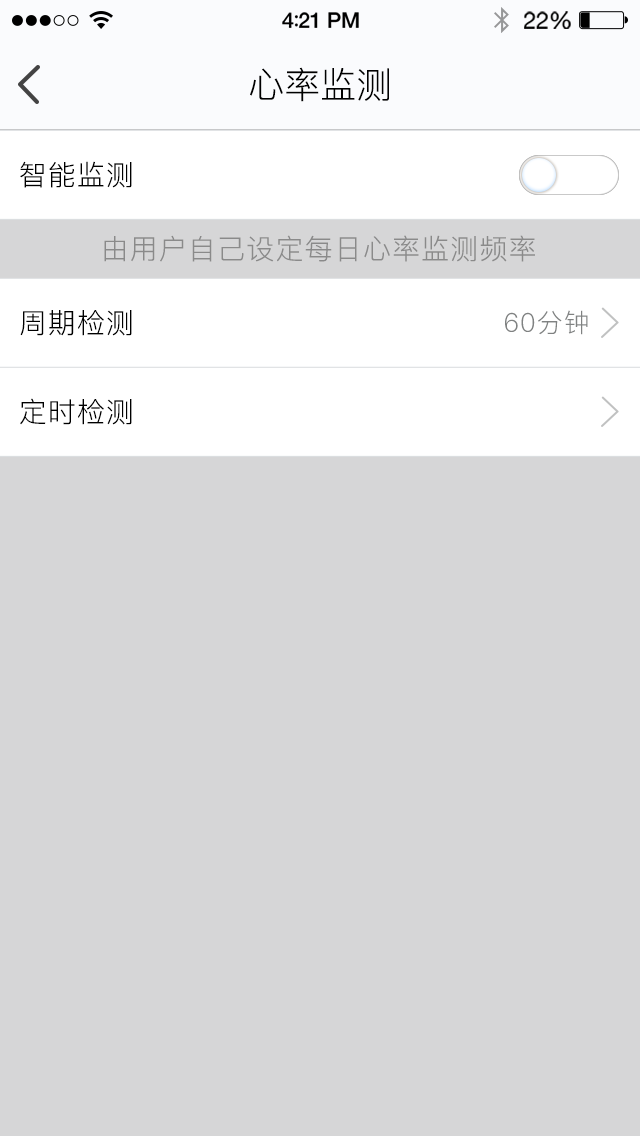
<style>
.page{position:relative;width:640px;height:1136px;background:#d6d6d7}
.page>*{position:absolute;margin:0}
.t1{font:36px "PingFang-SC-Regular";color:#000000}
.t2{font:28px "PingFang-SC-Regular";letter-spacing:0.04em;color:#000000}
.t3{font:28px "PingFang-SC-Regular";letter-spacing:0.04em;color:#8a8a8a}
.t4{font:26px "PingFang-SC-Regular";letter-spacing:0.04em;color:#808282}
</style>
<div class="page">
<p class="t1" style="left:250px;top:67px;width:139px;height:35px">心率监测</p>
<p class="t2" style="left:20px;top:161px;width:112px;height:27px">智能监测</p>
<p class="t3" style="left:104px;top:235px;width:431px;height:27px">由用户自己设定每日心率监测频率</p>
<p class="t2" style="left:20px;top:310px;width:112px;height:26px">周期检测</p>
<p class="t4" style="left:505px;top:310px;width:83px;height:25px">60分钟</p>
<p class="t2" style="left:20px;top:398px;width:112px;height:27px">定时检测</p>
</div>
